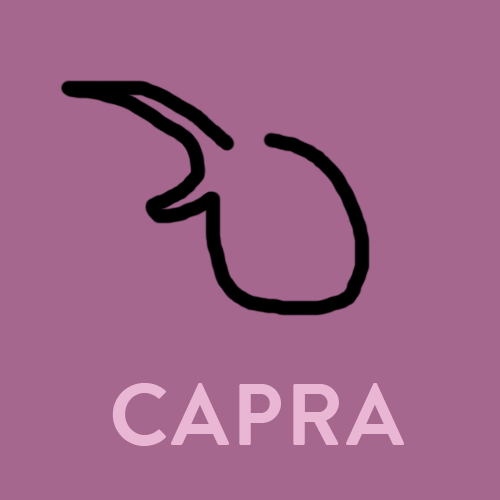
<style>
.page{position:relative;width:500px;height:500px;background:#a5678e}
.page>*{position:absolute;margin:0}
.t1{font:150px "iCielBrandonText-Bold";letter-spacing:0.025em;color:#e9b7d4}
</style>
<div class="page">
<p class="t1" style="left:112px;top:383px;width:293px;height:63px">CAPRA</p>
</div>
